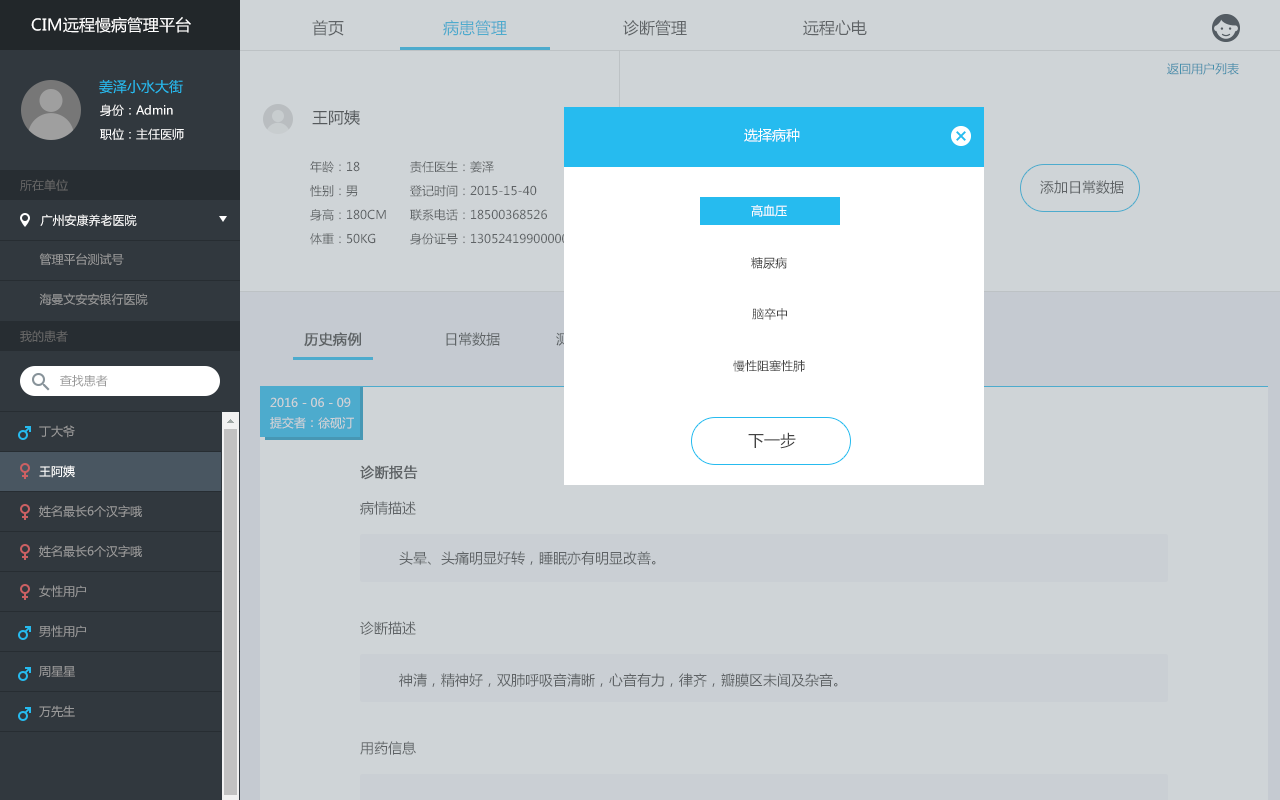
<style>
.page{position:relative;width:1280px;height:800px;background:#cfd4d7}
.page>*{position:absolute;margin:0}
.t1{font:16px "MicrosoftYaHei";color:#ffffff}
.t2{font:16px "MicrosoftYaHei";color:#5f6366}
.t3{font:16px "MicrosoftYaHei"}
.t4{font:12px "MicrosoftYaHei";color:#4491ad}
.t5{font:14px "MicrosoftYaHei";color:#26bbef}
.t6{font:12px "MicrosoftYaHei";color:#ffffff}
.t7{font:16px "MicrosoftYaHei";color:#55595c}
.t8{font:14px "MicrosoftYaHei";color:#ffffff}
.t9{font:12px/24px "MicrosoftYaHei";color:#5f6366}
.t10{font:12px "MicrosoftYaHei";color:#666666}
.t11{font:14px "MicrosoftYaHei";color:#5f6366}
.t12{font:12px "MicrosoftYaHei";color:#999999}
.t13{font:12px "MicrosoftYaHei";color:#434343}
.t14{font:14px "MicrosoftYaHei"}
.t15{font:14px "MicrosoftYaHei";font-weight:bold}
.t16{font:12px/20px "MicrosoftYaHei";color:#cfd4d7}
.t17{font:12px/20px "MicrosoftYaHei";color:#999999}
.t18{font:12px/20px "MicrosoftYaHei";color:#ffffff}
.t19{font:16px "MicrosoftYaHei";color:#434343}
.t20{font:14px "MicrosoftYaHei";color:#5f6366;font-weight:bold}
</style>
<div class="page">
<p class="t1" style="left:31px;top:17px;width:160px;height:16px">CIM远程慢病管理平台</p>
<p class="t2" style="left:312px;top:20px;width:32px;height:16px">首页</p>
<p class="t3" style="left:443px;top:20px;width:424px;height:16px">病患管理    诊断管理    远程心电</p>
<p class="t4" style="left:1167px;top:63px;width:72px;height:12px">返回用户列表</p>
<p class="t5" style="left:99px;top:79px;width:84px;height:15px">姜泽小水大街</p>
<p class="t6" style="left:100px;top:104px;width:73px;height:12px">身份：Admin</p>
<p class="t7" style="left:312px;top:110px;width:48px;height:15px">王阿姨</p>
<p class="t6" style="left:100px;top:128px;width:84px;height:12px">职位：主任医师</p>
<p class="t8" style="left:744px;top:128px;width:56px;height:14px">选择病种</p>
<p class="t9" style="left:310px;top:161px;width:76px;height:84px">年龄：18 <br>性别：男<br>身高：180CM<br>体重：50KG</p>
<p class="t9" style="left:410px;top:161px;width:187px;height:84px">责任医生：姜泽<br>登记时间：2015-15-40<br>联系电话：18500368526<br>身份证号：130524199000000000</p>
<p class="t10" style="left:20px;top:179px;width:48px;height:12px">所在单位</p>
<p class="t11" style="left:1040px;top:180px;width:84px;height:14px">添加日常数据</p>
<p class="t6" style="left:751px;top:204px;width:36px;height:13px">高血压</p>
<p class="t6" style="left:40px;top:214px;width:97px;height:13px">广州安康养老医院</p>
<p class="t12" style="left:39px;top:253px;width:85px;height:13px">管理平台测试号</p>
<p class="t13" style="left:751px;top:257px;width:36px;height:12px">糖尿病</p>
<p class="t12" style="left:39px;top:293px;width:109px;height:12px">海曼文安安银行医院</p>
<p class="t13" style="left:752px;top:308px;width:35px;height:12px">脑卒中</p>
<p class="t10" style="left:20px;top:330px;width:48px;height:12px">我的患者</p>
<p class="t14" style="left:304px;top:332px;width:610px;height:15px"><span class="t15">历史病例</span>                    日常数据  测量数据                     心电报告                  智能健康评估</p>
<p class="t13" style="left:733px;top:360px;width:72px;height:12px">慢性阻塞性肺</p>
<p class="t12" style="left:60px;top:375px;width:48px;height:12px">查找患者</p>
<p class="t16" style="left:270px;top:397px;width:84px;height:32px">2016 - 06 - 09<br>提交者：徐砚汀</p>
<p class="t17" style="left:39px;top:425px;width:103px;height:293px">丁大爷<br><br><span class="t18">王阿姨<br></span><br>姓名最长6个汉字哦<br><br>姓名最长6个汉字哦<br><br>女性用户<br><br>男性用户<br><br>周星星<br><br>万先生<br><br>男女图表请区分<br><br>男性用户<br><br>男性用户<br><br>女性用户<br><br>工程师</p>
<p class="t19" style="left:748px;top:432px;width:48px;height:17px">下一步</p>
<p class="t20" style="left:360px;top:465px;width:58px;height:15px">诊断报告</p>
<p class="t11" style="left:360px;top:501px;width:56px;height:14px">病情描述</p>
<p class="t11" style="left:399px;top:551px;width:257px;height:14px">头晕、头痛明显好转，睡眠亦有明显改善。</p>
<p class="t11" style="left:360px;top:621px;width:56px;height:14px">诊断描述</p>
<p class="t11" style="left:399px;top:673px;width:439px;height:14px">神清，精神好，双肺呼吸音清晰，心音有力，律齐，瓣膜区未闻及杂音。</p>
<p class="t11" style="left:360px;top:741px;width:56px;height:14px">用药信息</p>
</div>
